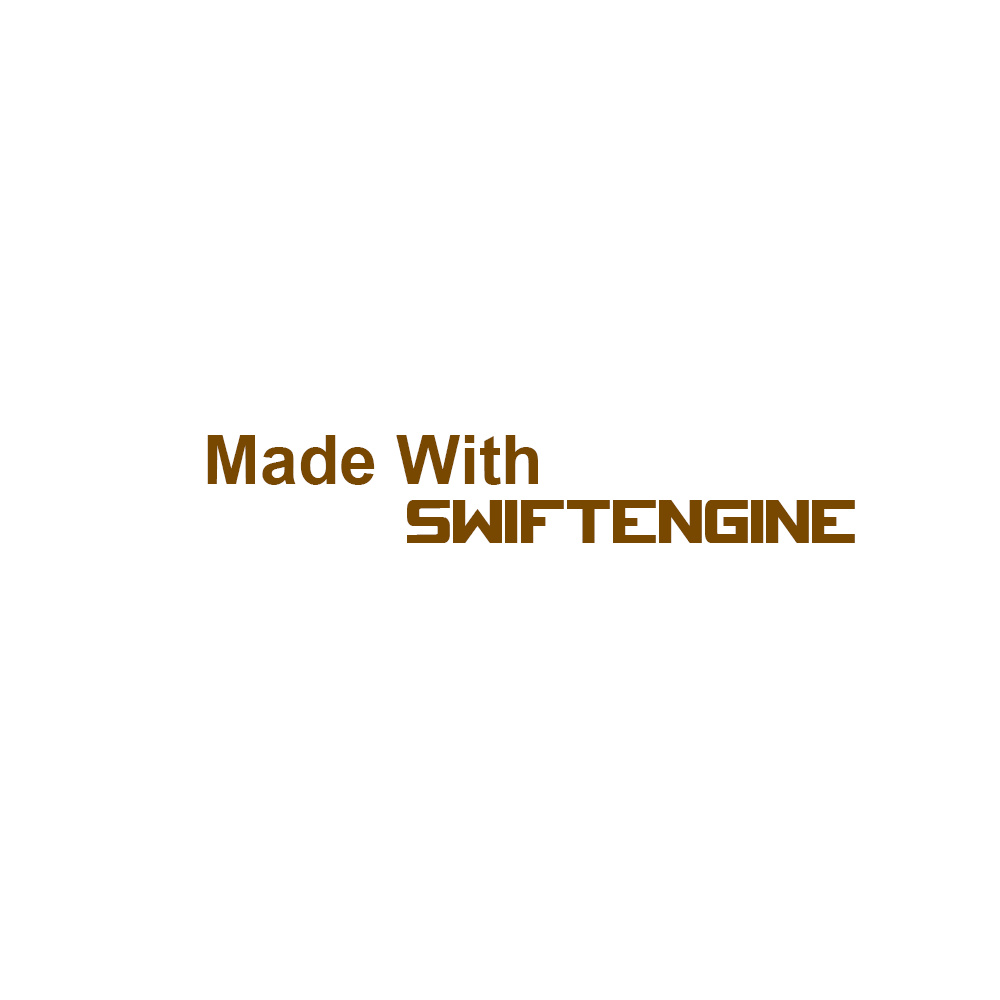
<style>
.page{position:relative;width:1000px;height:1000px;background:#ffffff}
.page>*{position:absolute;margin:0}
.t1{font:68px "Arial-BoldMT";color:#784800}
.t2{font:68px "SpaceMarine-Nominal";letter-spacing:-0.06em;color:#784800;scale:0.72 1}
</style>
<div class="page">
<p class="t1" style="left:207px;top:435px;width:331px;height:50px">Made With</p>
<p class="t2" style="left:407px;top:500px;width:448px;height:43px">SwiftEngine</p>
</div>
